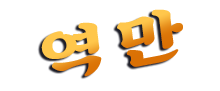
<style>
.page{position:relative;width:220px;height:91px;background:#ffffff}
.page>*{position:absolute;margin:0}
.t1{font:58.6px "SDKukdetopokki-bBd";letter-spacing:0.14em;scale:1.26 1}
</style>
<div class="page">
<p class="t1" style="left:41px;top:9px;width:142px;height:68px;rotate:-11deg">역만</p>
</div>
